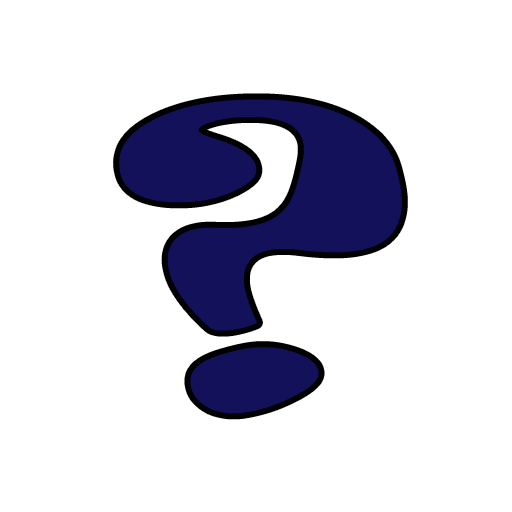
<style>
.page{position:relative;width:512px;height:512px;background:#ffffff}
.page>*{position:absolute;margin:0}
.t1{font:400.1px "Ravie";color:#12115a}
</style>
<div class="page">
<p class="t1" style="left:119px;top:99px;width:283px;height:315px">?</p>
</div>
